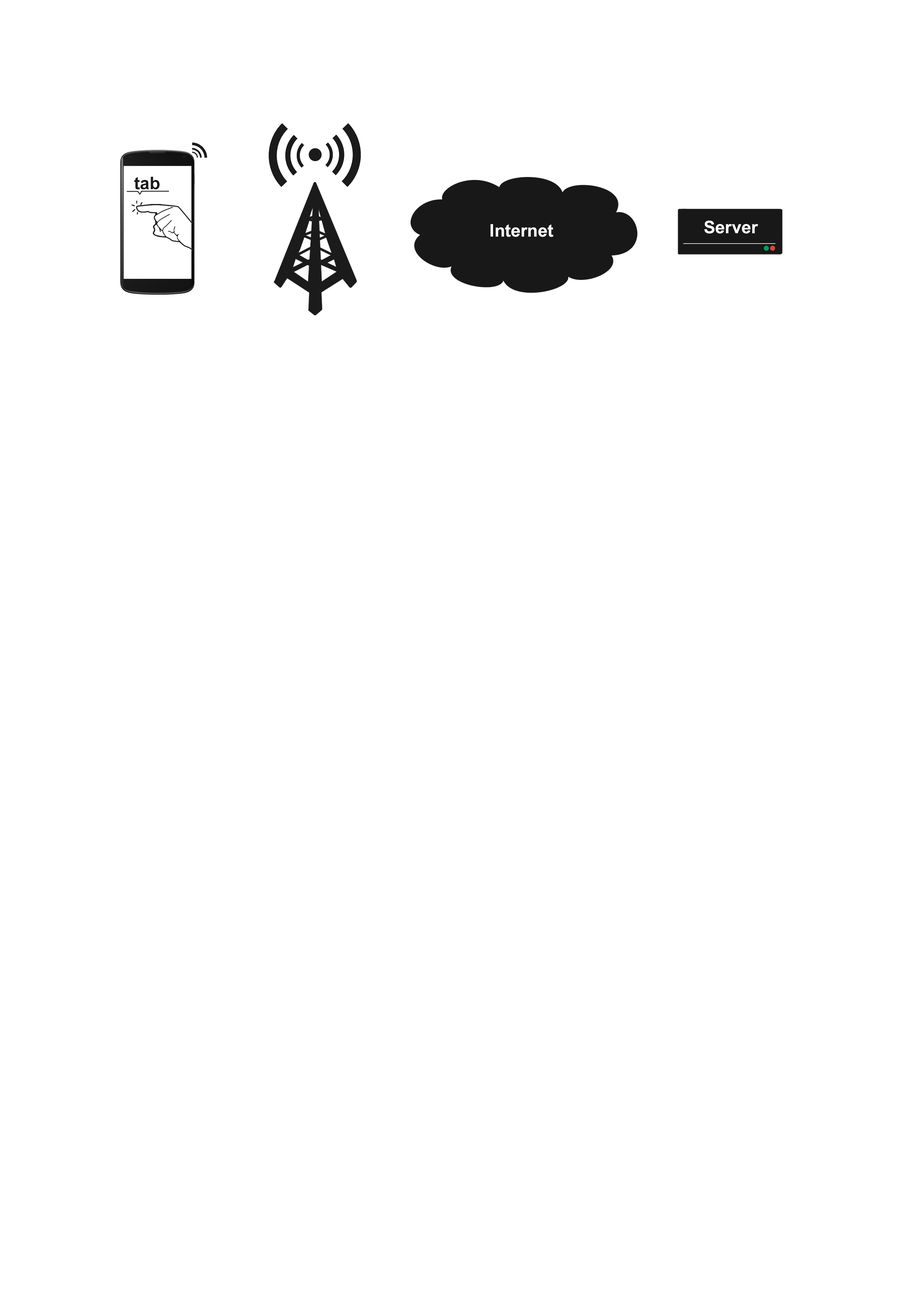
<style>
.page{position:relative;width:918px;height:1299px;background:#ffffff}
.page>*{position:absolute;margin:0}
.t1{font:17.4px "Arial-BoldMT";color:#181818}
.t2{font:17.4px "Arial-BoldMT";color:#ffffff}
</style>
<div class="page">
<p class="t1" style="left:134px;top:177px;width:26px;height:13px">tab</p>
<p class="t2" style="left:704px;top:220px;width:54px;height:14px">Server</p>
<p class="t2" style="left:491px;top:224px;width:62px;height:13px">Internet</p>
</div>
